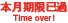
<style>
.page{position:relative;width:68px;height:23px;background:#ffffff}
.page>*{position:absolute;margin:0}
.t1{font:11px "GothicMB101Pr6N-Medium";color:#e53028;font-weight:bold}
</style>
<div class="page">
<p class="t1" style="left:0px;top:1px;width:68px;height:12px">本月期限已過</p>
</div>
